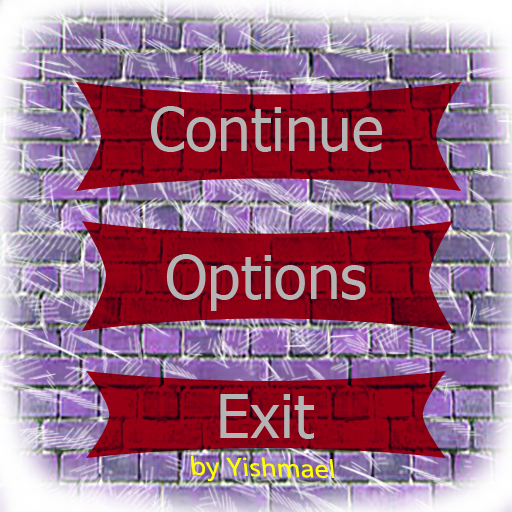
<style>
.page{position:relative;width:512px;height:512px}
.page>*{position:absolute;margin:0}
.t1{font:60px "Tahoma";color:#b4b4b4}
.t2{font:23.4px "MicrosoftYaHei";color:#ffff00;scale:1.09 1}
</style>
<div class="page">
<p class="t1" style="left:150px;top:106px;width:232px;height:46px">Continue</p>
<p class="t1" style="left:166px;top:254px;width:200px;height:57px">Options</p>
<p class="t1" style="left:220px;top:394px;width:94px;height:45px">Exit</p>
<p class="t2" style="left:190px;top:456px;width:145px;height:25px;rotate:1deg">by Yishmael</p>
</div>
